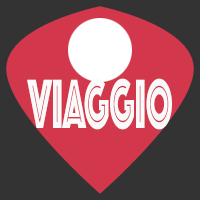
<style>
.page{position:relative;width:200px;height:200px;background:#333333}
.page>*{position:absolute;margin:0}
.t1{font:72px "Phosphate-Inline";letter-spacing:0.01em;color:#fbfafa;scale:0.5 1}
</style>
<div class="page">
<p class="t1" style="left:27px;top:78px;width:145px;height:52px">VIAGGIO</p>
</div>
